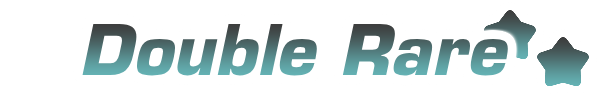
<style>
.page{position:relative;width:600px;height:100px;background:#ffffff}
.page>*{position:absolute;margin:0}
.t1{font:68px "Eurostile-BoldOblique"}
</style>
<div class="page">
<p class="t1" style="left:82px;top:23px;width:426px;height:53px">Double Rare</p>
</div>
